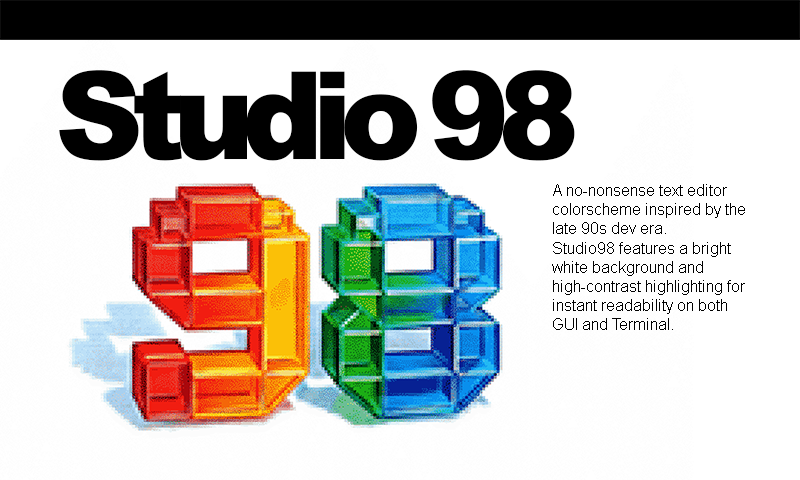
<style>
.page{position:relative;width:800px;height:480px;background:#ffffff}
.page>*{position:absolute;margin:0}
.t1{font:122.5px "Arial-Black";color:#000000}
.t2{font:16px "ArialMT";color:#000000}
</style>
<div class="page">
<p class="t1" style="left:59px;top:70px;width:516px;height:91px">Studio98</p>
<p class="t2" style="left:552px;top:184px;width:193px;height:146px">A no-nonsense text editor <br>colorscheme inspired by the <br>late 90s dev era.<br>Studio98 features a bright <br>white background and <br>high-contrast highlighting for <br>instant readability on both <br>GUI and Terminal.</p>
</div>
